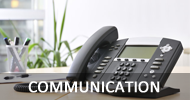
<style>
.page{position:relative;width:190px;height:100px}
.page>*{position:absolute;margin:0}
.t1{font:16.7px "Calibri";color:#ffffff;font-weight:bold}
</style>
<div class="page">
<p class="t1" style="left:28px;top:81px;width:132px;height:12px">COMMUNICATION</p>
</div>
